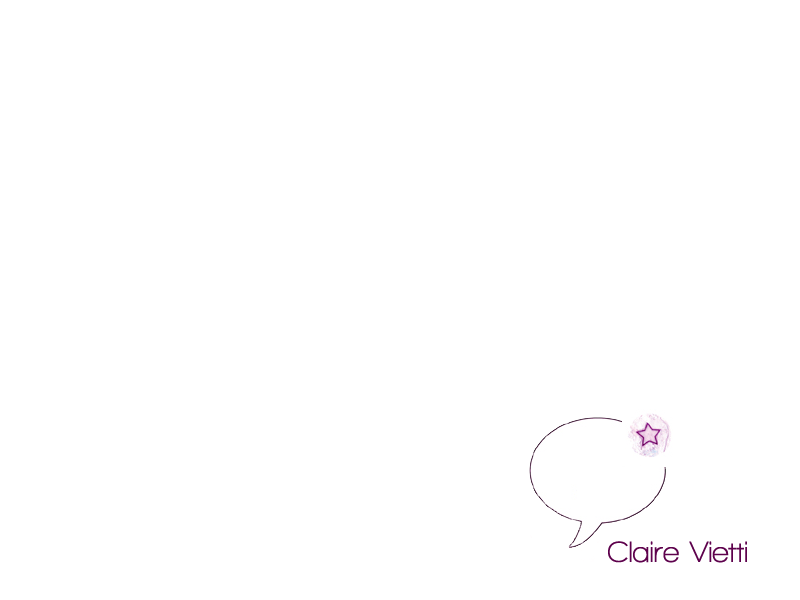
<style>
.page{position:relative;width:800px;height:600px;background:#ffffff}
.page>*{position:absolute;margin:0}
.t1{font:30px "WalkwayBold";color:#5e024d}
</style>
<div class="page">
<p class="t1" style="left:608px;top:541px;width:139px;height:22px">Claire Vietti</p>
</div>
